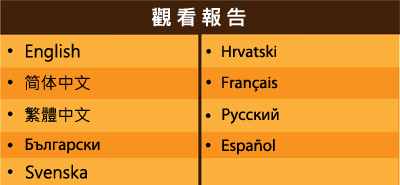
<style>
.page{position:relative;width:400px;height:185px;background:#fbb03b}
.page>*{position:absolute;margin:0}
.t1{font:20.8px "MicrosoftJhengHeiBold";letter-spacing:0.2em;color:#ffffff}
.t2{font:16.7px "MicrosoftJhengHeiRegular";color:#000000}
.t3{font:16.7px "MyriadPro-Regular";color:#000000}
</style>
<div class="page">
<p class="t1" style="left:152px;top:7px;width:94px;height:20px">觀看報告</p>
<p class="t2" style="left:26px;top:43px;width:54px;height:19px">English</p>
<p class="t3" style="left:222px;top:45px;width:55px;height:13px">Hrvatski</p>
<p class="t2" style="left:25px;top:75px;width:65px;height:16px">简体中文</p>
<p class="t3" style="left:222px;top:76px;width:56px;height:16px">Français</p>
<p class="t2" style="left:25px;top:107px;width:65px;height:16px">繁體中文</p>
<p class="t3" style="left:222px;top:108px;width:57px;height:16px">Русский</p>
<p class="t3" style="left:25px;top:138px;width:75px;height:16px">Български</p>
<p class="t3" style="left:222px;top:139px;width:53px;height:16px">Español</p>
<p class="t2" style="left:26px;top:164px;width:61px;height:15px">Svenska</p>
</div>
